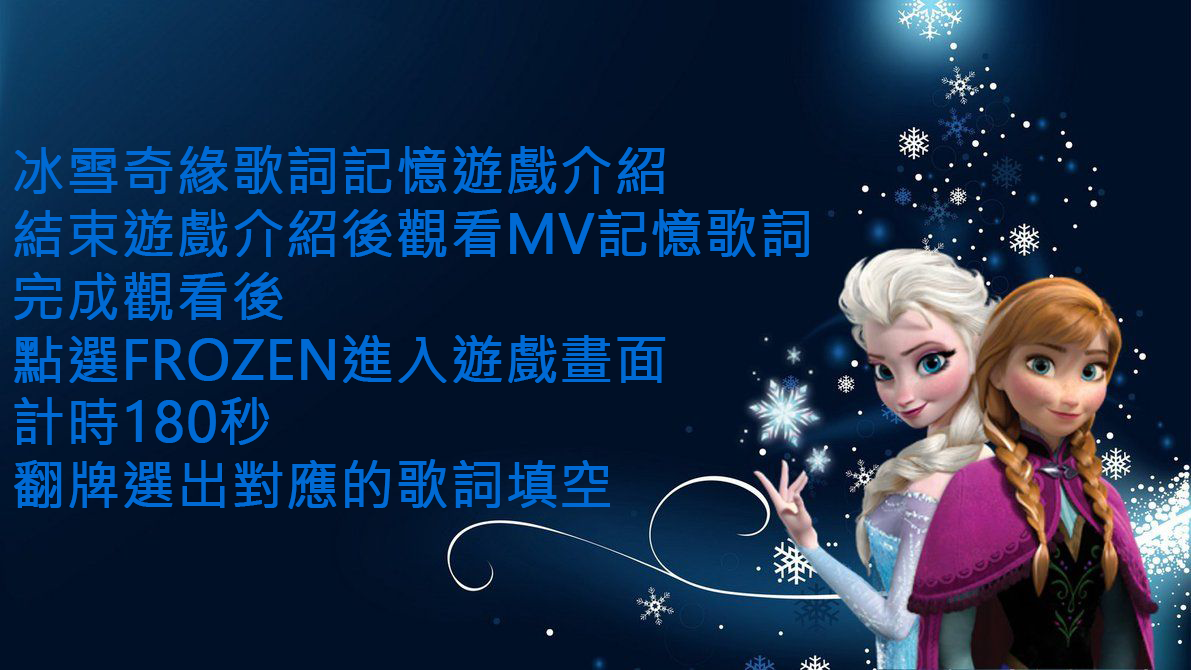
<style>
.page{position:relative;width:1191px;height:670px;background:#001027}
.page>*{position:absolute;margin:0}
.t1{font:53.4px/62.9px "MicrosoftJhengHeiUIRegular";color:#006ad4;font-weight:bold}
</style>
<div class="page">
<p class="t1" style="left:14px;top:145px;width:795px;height:364px">冰雪奇緣歌詞記憶遊戲介紹<br>結束遊戲介紹後觀看MV記憶歌詞<br>完成觀看後<br>點選FROZEN進入遊戲畫面<br>計時180秒<br>翻牌選出對應的歌詞填空</p>
</div>
